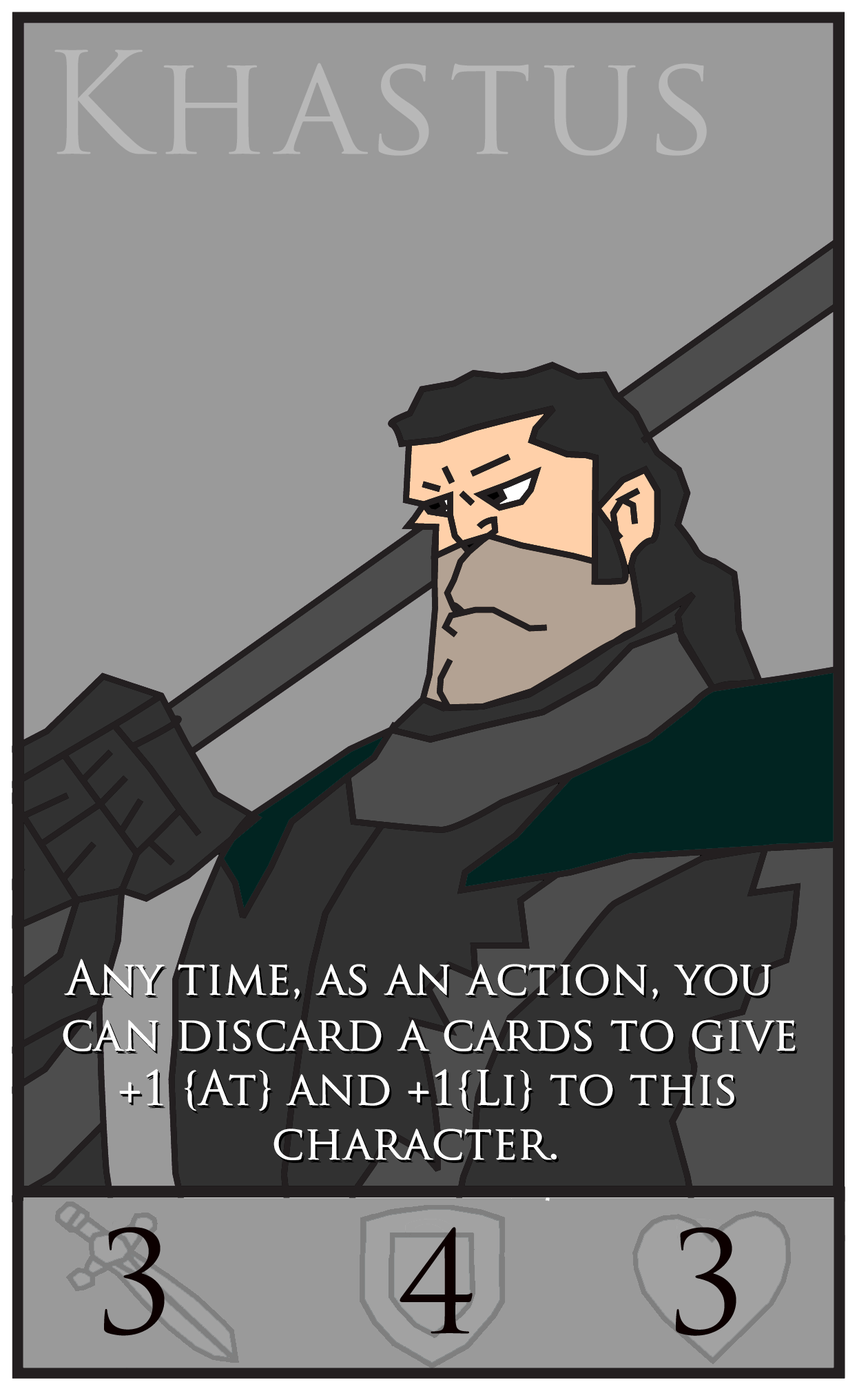
<style>
.page{position:relative;width:857px;height:1391px;background:#9a9a9a}
.page>*{position:absolute;margin:0}
.t1{font:45.9px "TrajanPro-Regular";color:#ffffff}
.t2{font:45.9px "TrajanPro-Regular"}
</style>
<div class="page">
<p class="t1" style="left:64px;top:958px;width:707px;height:41px">Any time, as an action, you</p>
<p class="t1" style="left:65px;top:959px;width:707px;height:41px">Any time, as an action, you</p>
<p class="t2" style="left:65px;top:961px;width:707px;height:40px">Any time, as an action, you</p>
<p class="t2" style="left:65px;top:961px;width:707px;height:40px">Any time, as an action, you</p>
<p class="t1" style="left:63px;top:1020px;width:732px;height:31px">can discard a cards to give</p>
<p class="t1" style="left:63px;top:1020px;width:733px;height:31px">can discard a cards to give</p>
<p class="t2" style="left:64px;top:1022px;width:733px;height:31px">can discard a cards to give</p>
<p class="t2" style="left:64px;top:1022px;width:733px;height:31px">can discard a cards to give</p>
<p class="t1" style="left:119px;top:1069px;width:615px;height:42px">+1 {At} and +1{Li} to this</p>
<p class="t1" style="left:120px;top:1069px;width:615px;height:42px">+1 {At} and +1{Li} to this</p>
<p class="t2" style="left:121px;top:1071px;width:614px;height:42px">+1 {At} and +1{Li} to this</p>
<p class="t2" style="left:121px;top:1071px;width:614px;height:42px">+1 {At} and +1{Li} to this</p>
<p class="t1" style="left:274px;top:1129px;width:282px;height:31px">character.</p>
<p class="t1" style="left:274px;top:1129px;width:283px;height:31px">character.</p>
<p class="t2" style="left:275px;top:1131px;width:282px;height:31px">character.</p>
<p class="t2" style="left:275px;top:1131px;width:282px;height:31px">character.</p>
</div>
